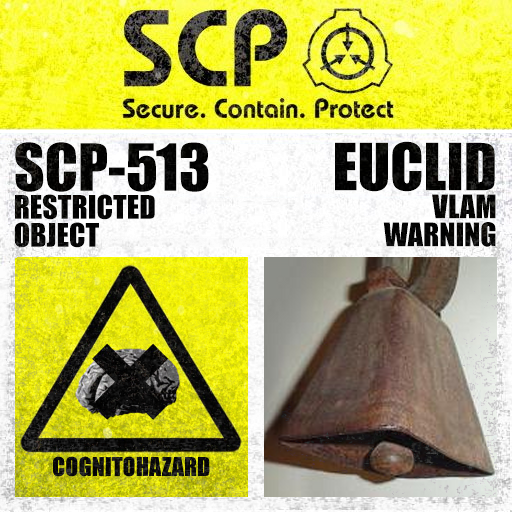
<style>
.page{position:relative;width:512px;height:512px}
.page>*{position:absolute;margin:0}
.t1{font:30px/28px "Impact";color:#000000}
.t2{font:60px/28px "Impact";color:#000000}
</style>
<div class="page">
<p class="t1" style="left:14px;top:142px;width:195px;height:106px"><span class="t2">SCP-513<br></span>RESTRICTED<br>OBJECT</p>
<p class="t1" style="left:335px;top:141px;width:161px;height:106px;text-align:right"><span class="t2">EUCLID<br></span>VLAM<br>WARNING</p>
</div>
